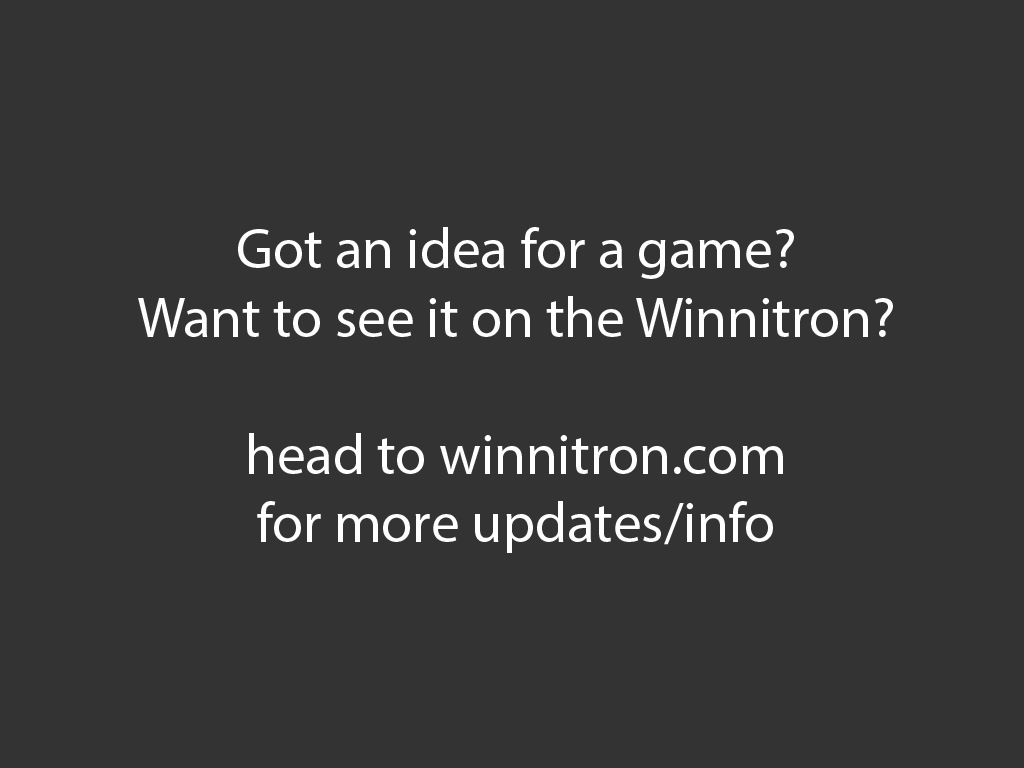
<style>
.page{position:relative;width:1024px;height:768px;background:#333333}
.page>*{position:absolute;margin:0}
.t1{font:57px "MyriadPro-Regular";color:#fefefe}
</style>
<div class="page">
<p class="t1" style="left:138px;top:227px;width:755px;height:326px;text-align:center">Got an idea for a game?<br>Want to see it on the Winnitron?<br><br>head to winnitron.com<br>for more updates/info</p>
</div>
